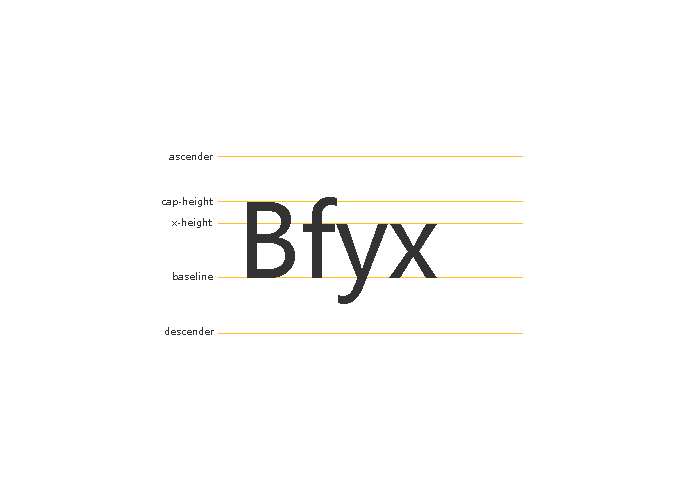
<style>
.page{position:relative;width:700px;height:500px;background:#ffffff}
.page>*{position:absolute;margin:0}
.t1{font:10px "MicrosoftYaHei";color:#333333}
.t2{font:100px "MicrosoftYaHei";color:#333333}
</style>
<div class="page">
<p class="t1" style="left:169px;top:152px;width:44px;height:8px">ascender</p>
<p class="t1" style="left:162px;top:197px;width:51px;height:10px">cap-height</p>
<p class="t2" style="left:247px;top:197px;width:190px;height:107px">Bfyx</p>
<p class="t1" style="left:172px;top:218px;width:40px;height:10px">x-height</p>
<p class="t1" style="left:173px;top:272px;width:40px;height:8px">baseline</p>
<p class="t1" style="left:165px;top:327px;width:49px;height:8px">descender</p>
</div>
